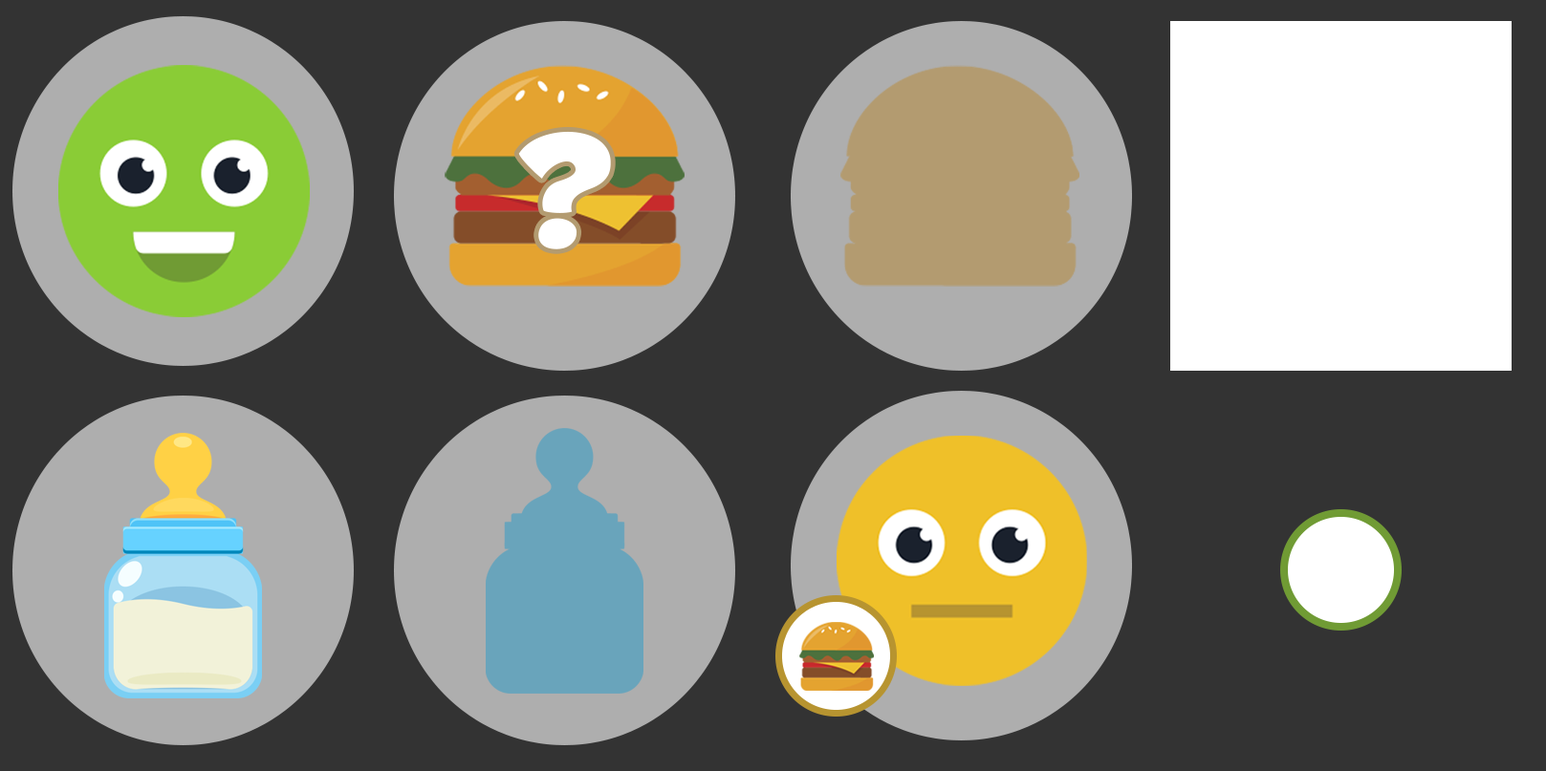
<style>
.page{position:relative;width:1546px;height:771px;background:#333333}
.page>*{position:absolute;margin:0}
.t1{font:188.4px "DRAgu";color:#ffffff;font-variant:small-caps}
</style>
<div class="page">
<p class="t1" style="left:518px;top:131px;width:93px;height:118px">?</p>
</div>
